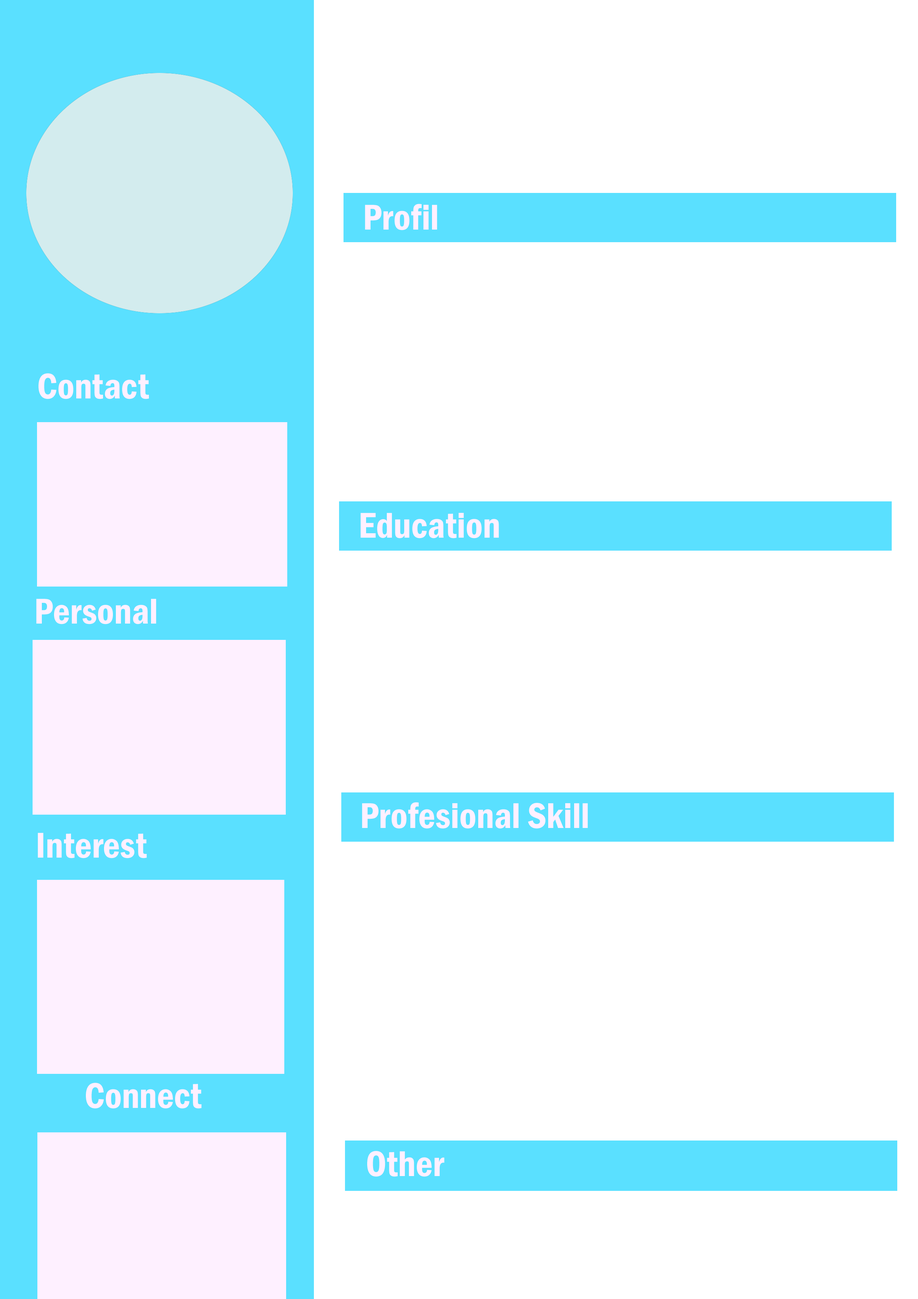
<style>
.page{position:relative;width:918px;height:1299px;background:#ffffff}
.page>*{position:absolute;margin:0}
.t1{font:37px "FranklinGothic-DemiCond";color:#fef0ff}
</style>
<div class="page">
<p class="t1" style="left:365px;top:204px;width:72px;height:26px">Profil</p>
<p class="t1" style="left:39px;top:373px;width:110px;height:26px">Contact</p>
<p class="t1" style="left:361px;top:513px;width:138px;height:25px">Education</p>
<p class="t1" style="left:36px;top:599px;width:120px;height:25px">Personal</p>
<p class="t1" style="left:362px;top:802px;width:226px;height:27px">Profesional Skill</p>
<p class="t1" style="left:38px;top:833px;width:109px;height:25px">Interest</p>
<p class="t1" style="left:86px;top:1083px;width:116px;height:25px">Connect</p>
<p class="t1" style="left:367px;top:1151px;width:78px;height:26px">Other</p>
</div>
